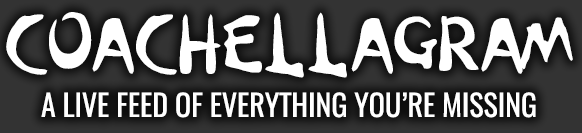
<style>
.page{position:relative;width:582px;height:133px}
.page>*{position:absolute;margin:0}
.t1{font:72px "ChellaType-Regular";color:#ffffff}
.t2{font:30px "Oswald-Regular";color:#ffffff}
</style>
<div class="page">
<p class="t1" style="left:6px;top:12px;width:567px;height:66px">COACHELLAGRAM</p>
<p class="t2" style="left:41px;top:92px;width:495px;height:26px">A LIVE FEED OF EVERYTHING YOU’RE MISSING</p>
</div>
